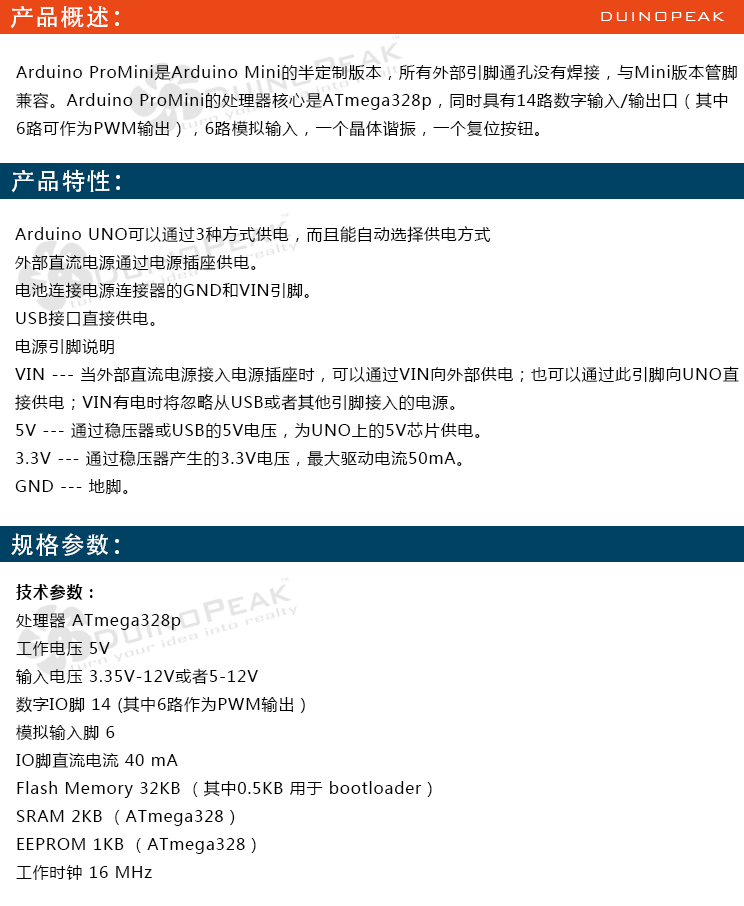
<style>
.page{position:relative;width:744px;height:906px;background:#ffffff}
.page>*{position:absolute;margin:0}
.t1{font:24px "AdobeHeitiStd-Regular";letter-spacing:0.05em;color:#ffffff}
.t2{font:18px "BankGothicBT-Light";letter-spacing:0.05em;color:#ffffff}
.t3{font:16px "MicrosoftYaHei";letter-spacing:0.05em;color:#000000}
.t4{font:16px "MicrosoftYaHei-Bold";letter-spacing:0.05em;color:#000000}
</style>
<div class="page">
<p class="t1" style="left:10px;top:6px;width:109px;height:23px">产品概述：</p>
<p class="t2" style="left:601px;top:12px;width:124px;height:9px">DUINOPEAK</p>
<p class="t3" style="left:16px;top:64px;width:721px;height:73px">Arduino ProMini是Arduino Mini的半定制版本，所有外部引脚通孔没有焊接，与Mini版本管脚<br>兼容。Arduino ProMini的处理器核心是ATmega328p，同时具有14路数字输入/输出口（其中<br>6路可作为PWM输出），6路模拟输入，一个晶体谐振，一个复位按钮。</p>
<p class="t1" style="left:11px;top:169px;width:109px;height:24px">产品特性：</p>
<p class="t3" style="left:15px;top:226px;width:724px;height:268px">Arduino UNO可以通过3种方式供电，而且能自动选择供电方式<br>外部直流电源通过电源插座供电。<br>电池连接电源连接器的GND和VIN引脚。<br>USB接口直接供电。<br>电源引脚说明<br>VIN --- 当外部直流电源接入电源插座时，可以通过VIN向外部供电；也可以通过此引脚向UNO直<br>接供电；VIN有电时将忽略从USB或者其他引脚接入的电源。<br>5V --- 通过稳压器或USB的5V电压，为UNO上的5V芯片供电。<br>3.3V --- 通过稳压器产生的3.3V电压，最大驱动电流50mA。<br>GND --- 地脚。</p>
<p class="t1" style="left:11px;top:533px;width:108px;height:23px">规格参数：</p>
<p class="t3" style="left:16px;top:584px;width:416px;height:296px"><span class="t4">技术参数：</span><br>处理器 ATmega328p<br>工作电压 5V<br>输入电压 3.35V-12V或者5-12V<br>数字IO脚 14 (其中6路作为PWM输出）<br>模拟输入脚 6<br>IO脚直流电流 40 mA<br>Flash Memory 32KB （其中0.5KB 用于 bootloader）<br>SRAM 2KB （ATmega328）<br>EEPROM 1KB （ATmega328）<br>工作时钟 16 MHz</p>
</div>
